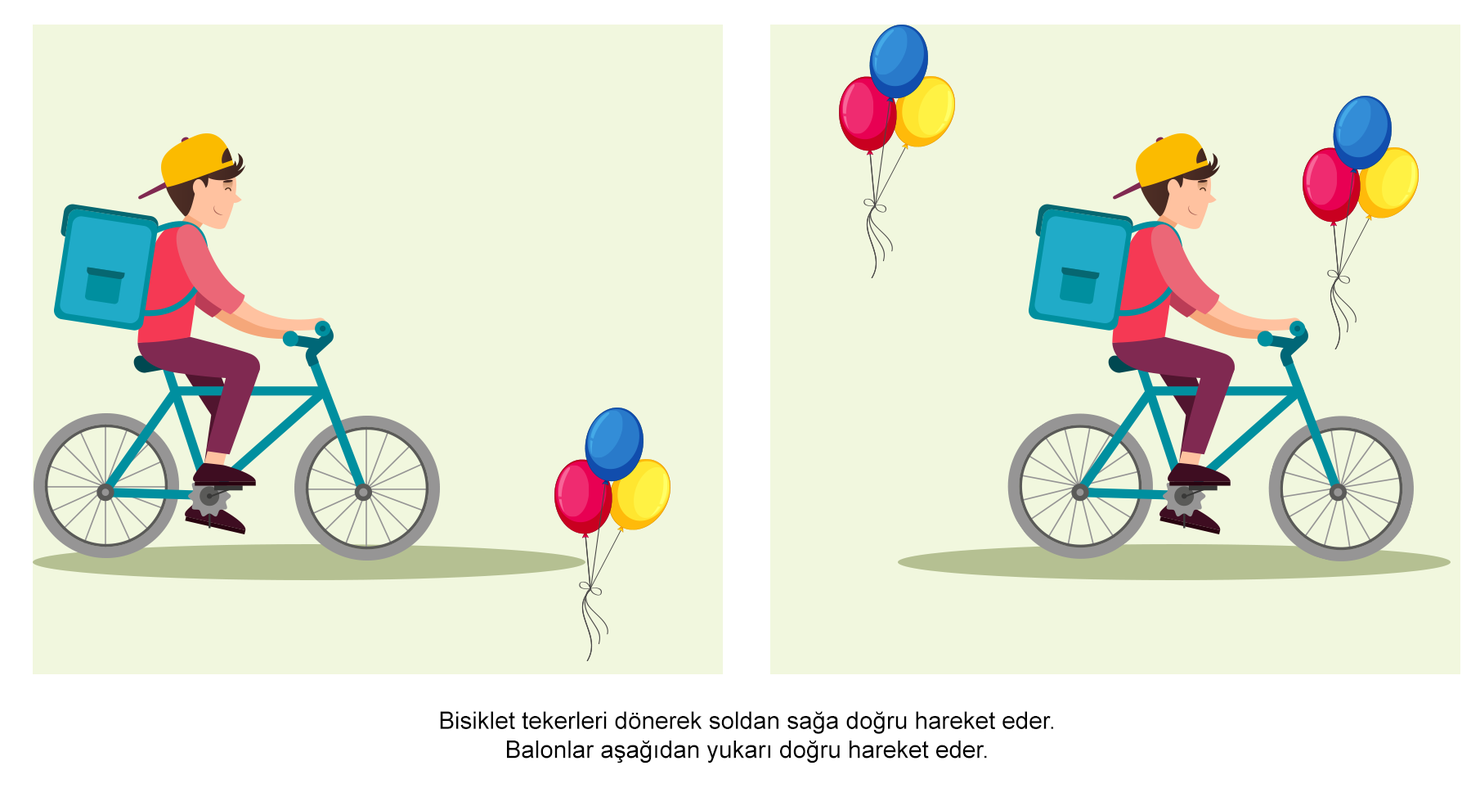
<style>
.page{position:relative;width:1480px;height:806px;background:#f1f7de}
.page>*{position:absolute;margin:0}
.t1{font:24.2px "ArialMT";color:#000000}
</style>
<div class="page">
<p class="t1" style="left:440px;top:711px;width:613px;height:52px;text-align:center">Bisiklet tekerleri dönerek soldan sağa doğru hareket eder.<br>Balonlar aşağıdan yukarı doğru hareket eder.</p>
</div>
